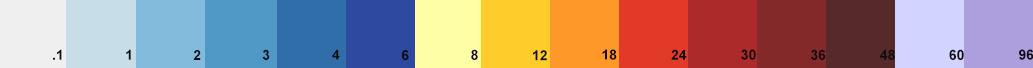
<style>
.page{position:relative;width:1033px;height:68px}
.page>*{position:absolute;margin:0}
.t1{font:14px "Arial-BoldMT";color:#100c10}
</style>
<div class="page">
<p class="t1" style="left:53px;top:49px;width:9px;height:11px">.1</p>
<p class="t1" style="left:126px;top:49px;width:5px;height:11px">1</p>
<p class="t1" style="left:193px;top:50px;width:8px;height:10px">2</p>
<p class="t1" style="left:262px;top:49px;width:8px;height:11px">3</p>
<p class="t1" style="left:332px;top:49px;width:8px;height:11px">4</p>
<p class="t1" style="left:402px;top:50px;width:7px;height:11px">6</p>
<p class="t1" style="left:471px;top:49px;width:7px;height:11px">8</p>
<p class="t1" style="left:533px;top:50px;width:14px;height:11px">12</p>
<p class="t1" style="left:602px;top:49px;width:15px;height:11px">18</p>
<p class="t1" style="left:671px;top:49px;width:16px;height:11px">24</p>
<p class="t1" style="left:741px;top:49px;width:15px;height:11px">30</p>
<p class="t1" style="left:811px;top:49px;width:15px;height:11px">36</p>
<p class="t1" style="left:880px;top:49px;width:15px;height:11px">48</p>
<p class="t1" style="left:949px;top:49px;width:15px;height:11px">60</p>
<p class="t1" style="left:1019px;top:49px;width:15px;height:11px">96</p>
</div>
